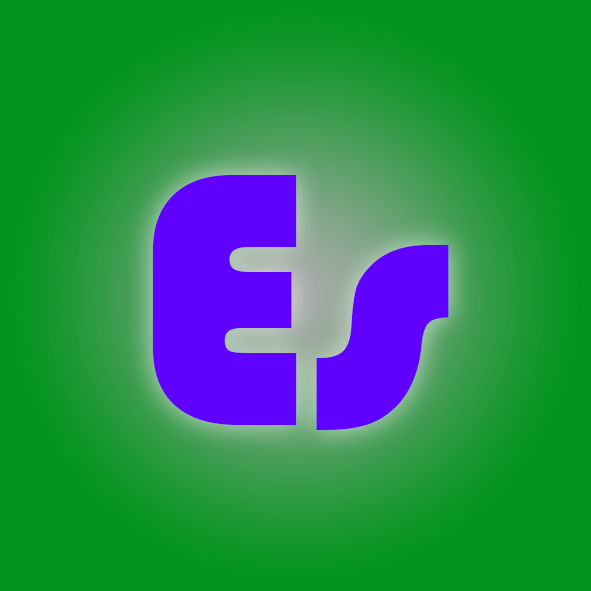
<style>
.page{position:relative;width:591px;height:591px;background:#00941c}
.page>*{position:absolute;margin:0}
.t1{font:375px "Bauhaus93";color:#6000fe}
</style>
<div class="page">
<p class="t1" style="left:152px;top:175px;width:297px;height:255px">Es</p>
</div>
